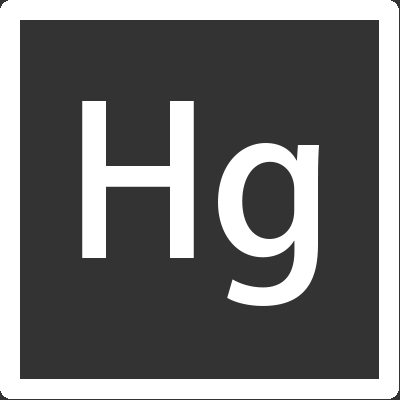
<style>
.page{position:relative;width:400px;height:400px;background:#333333}
.page>*{position:absolute;margin:0}
.t1{font:204.5px "AdobeFanHeitiStd-Bold";color:#ffffff}
</style>
<div class="page">
<p class="t1" style="left:82px;top:101px;width:238px;height:205px">Hg</p>
</div>
